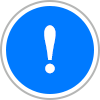
<style>
.page{position:relative;width:100px;height:100px;background:#007aff}
.page>*{position:absolute;margin:0}
.t1{font:75px "KannadaMN-Bold";letter-spacing:-0.01em;color:#ffffff}
</style>
<div class="page">
<p class="t1" style="left:44px;top:25px;width:12px;height:49px">!</p>
</div>
